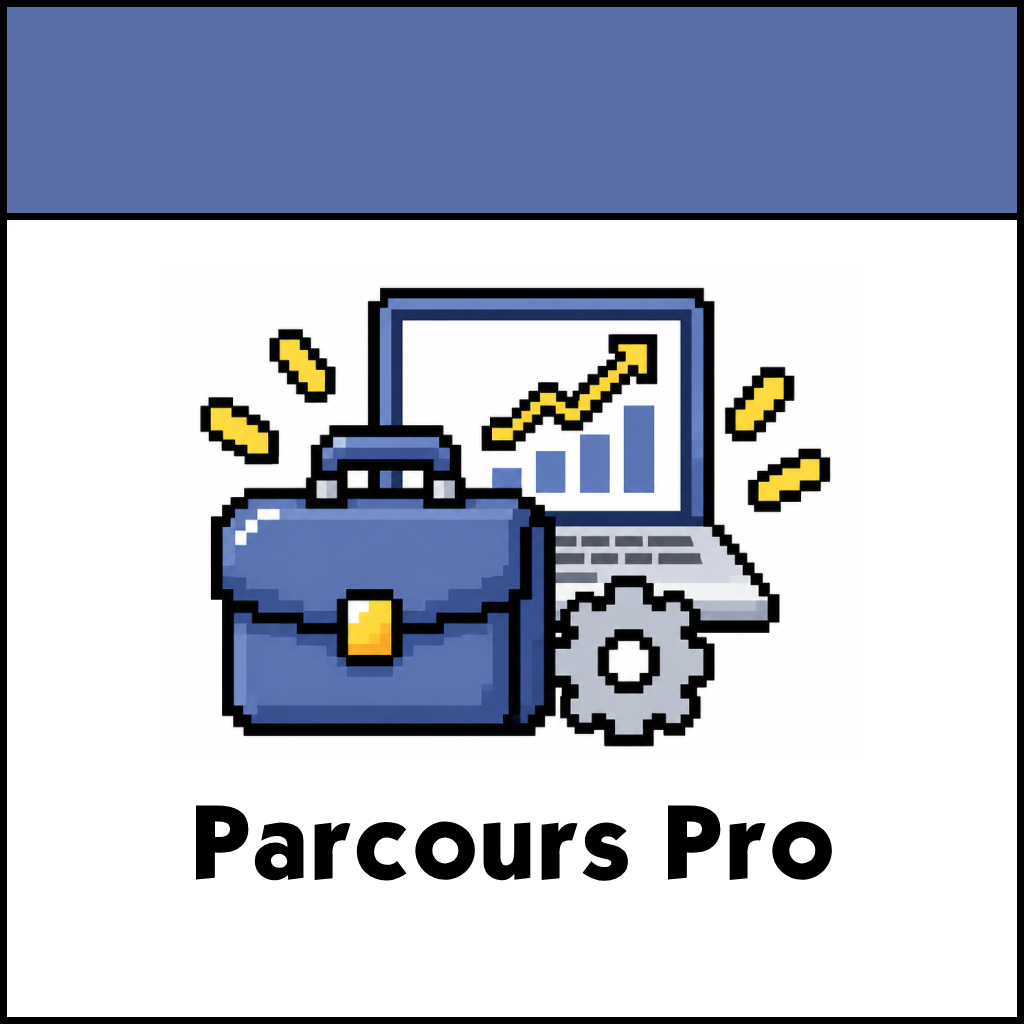
<style>
.page{position:relative;width:1024px;height:1024px;background:#ffffff}
.page>*{position:absolute;margin:0}
.t1{font:90px "KabelBdNormal";color:#000000}
</style>
<div class="page">
<p class="t1" style="left:196px;top:805px;width:636px;height:76px">Parcours Pro</p>
</div>
